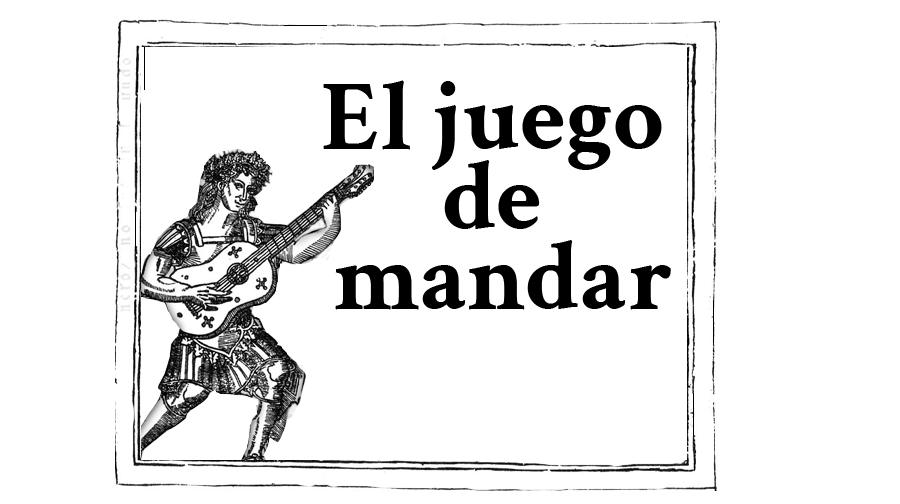
<style>
.page{position:relative;width:900px;height:504px;background:#ffffff}
.page>*{position:absolute;margin:0}
.t1{font:100px/72px "CrimsonText-Bold";color:#000000}
</style>
<div class="page">
<p class="t1" style="left:323px;top:80px;width:348px;height:230px;text-align:center">El juego <br>de <br>mandar</p>
</div>
